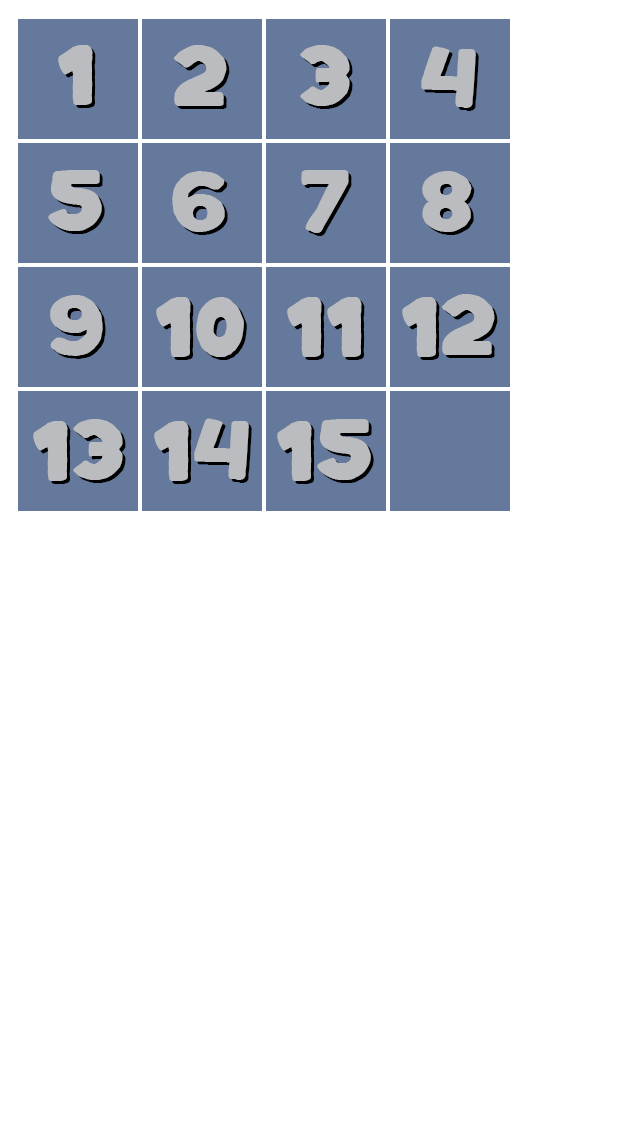
<style>
.page{position:relative;width:640px;height:1136px;background:#ffffff}
.page>*{position:absolute;margin:0}
.t1{font:66.7px "Kaph-Regular";color:#bbbcbf}
</style>
<div class="page">
<p class="t1" style="left:58px;top:45px;width:35px;height:60px">1</p>
<p class="t1" style="left:173px;top:45px;width:54px;height:61px">2</p>
<p class="t1" style="left:300px;top:45px;width:50px;height:61px">3</p>
<p class="t1" style="left:421px;top:46px;width:55px;height:62px">4</p>
<p class="t1" style="left:48px;top:170px;width:54px;height:61px">5</p>
<p class="t1" style="left:172px;top:171px;width:53px;height:61px">6</p>
<p class="t1" style="left:301px;top:170px;width:48px;height:63px">7</p>
<p class="t1" style="left:422px;top:171px;width:50px;height:61px">8</p>
<p class="t1" style="left:402px;top:294px;width:93px;height:63px">12</p>
<p class="t1" style="left:50px;top:295px;width:53px;height:61px">9</p>
<p class="t1" style="left:156px;top:297px;width:88px;height:60px">10</p>
<p class="t1" style="left:287px;top:297px;width:75px;height:60px">11</p>
<p class="t1" style="left:33px;top:419px;width:90px;height:62px">13</p>
<p class="t1" style="left:154px;top:418px;width:95px;height:63px">14</p>
<p class="t1" style="left:277px;top:419px;width:94px;height:62px">15</p>
</div>
